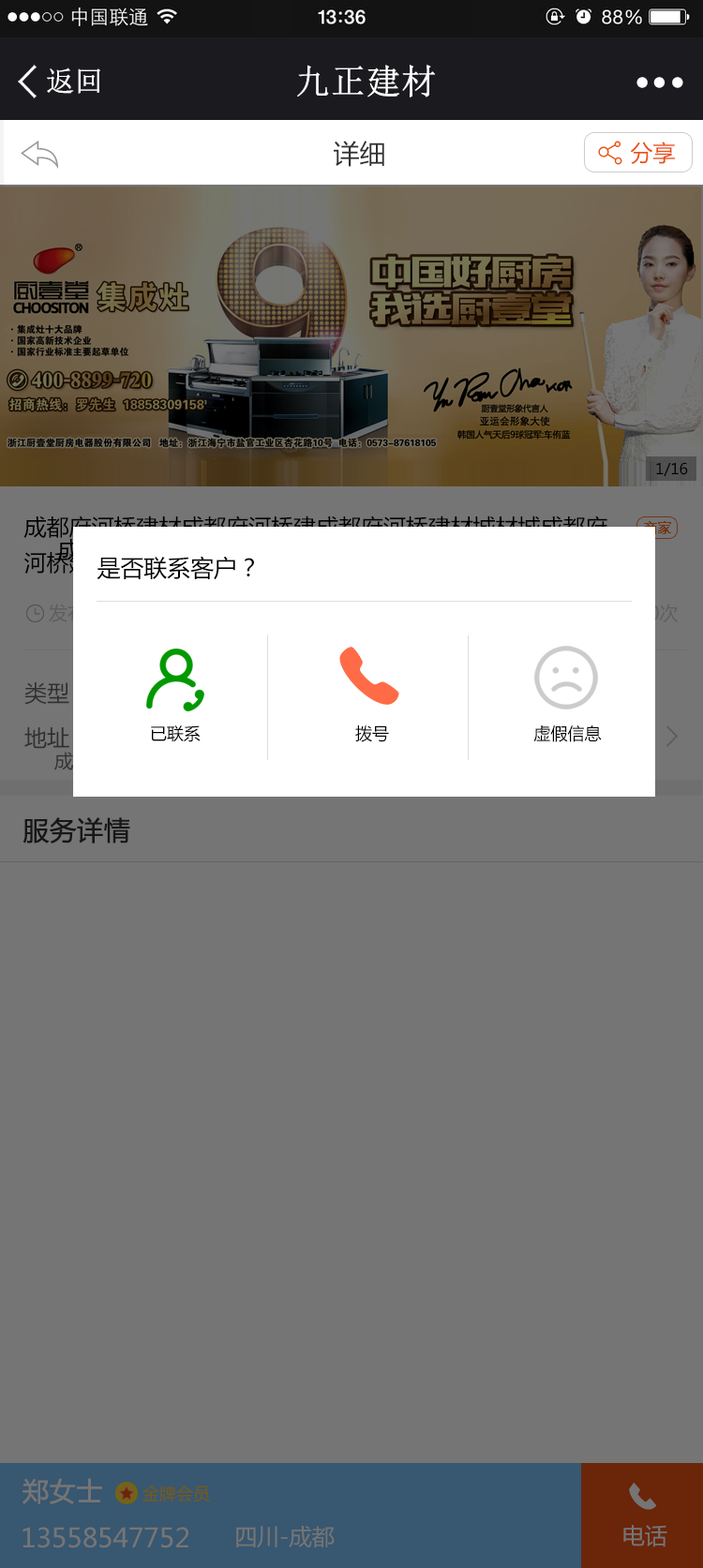
<style>
.page{position:relative;width:703px;height:1568px;background:#757575}
.page>*{position:absolute;margin:0}
.t1{font:34.4px "NSimSun";color:#ffffff;font-weight:bold}
.t2{font:28.1px "NSimSun";color:#ffffff;font-weight:bold}
.t3{font:26.2px "MicrosoftYaHei";color:#333333}
.t4{font:26.2px "MicrosoftYaHei";color:#333333;font-weight:bold}
.t5{font:22.5px "MicrosoftYaHei";color:#ea5114}
.t6{font:26.2px "MicrosoftYaHei";color:#999999;font-weight:bold}
.t7{font:15px "MicrosoftYaHei";color:#000000}
.t8{font:23.4px "MicrosoftYaHei";color:#000000}
.t9{font:16.9px "MicrosoftYaHei";color:#000000}
.t10{font:26.2px "MicrosoftYaHei";color:#171717;font-weight:bold}
.t11{font:26.2px "MicrosoftYaHei";color:#757575;font-weight:bold}
.t12{font:16.9px "MicrosoftYaHei";color:#755a13}
.t13{font:26.2px "MicrosoftYaHei";color:#757575}
.t14{font:22.5px "MicrosoftYaHei";color:#757575}
</style>
<div class="page">
<p class="t1" style="left:297px;top:65px;width:138px;height:32px">九正建材</p>
<p class="t2" style="left:47px;top:67px;width:53px;height:27px">返回</p>
<p class="t3" style="left:334px;top:141px;width:50px;height:26px"><span class="t4"><br></span>详细</p>
<p class="t5" style="left:630px;top:142px;width:45px;height:22px"><span class="t6"><br></span>分享</p>
<p class="t7" style="left:656px;top:462px;width:32px;height:14px">1/16</p>
<p class="t8" style="left:97px;top:556px;width:157px;height:24px">是否联系客户？</p>
<p class="t9" style="left:151px;top:725px;width:451px;height:17px">已联系                               拨号                             虚假信息</p>
<p class="t10" style="left:22px;top:817px;width:108px;height:27px">服务详情</p>
<p class="t11" style="left:22px;top:1478px;width:80px;height:26px">郑女士</p>
<p class="t12" style="left:142px;top:1486px;width:68px;height:16px">金牌会员</p>
<p class="t13" style="left:22px;top:1527px;width:166px;height:21px">13558547752</p>
<p class="t14" style="left:236px;top:1526px;width:99px;height:22px">四川-成都</p>
<p class="t14" style="left:623px;top:1525px;width:44px;height:22px">电话</p>
</div>
